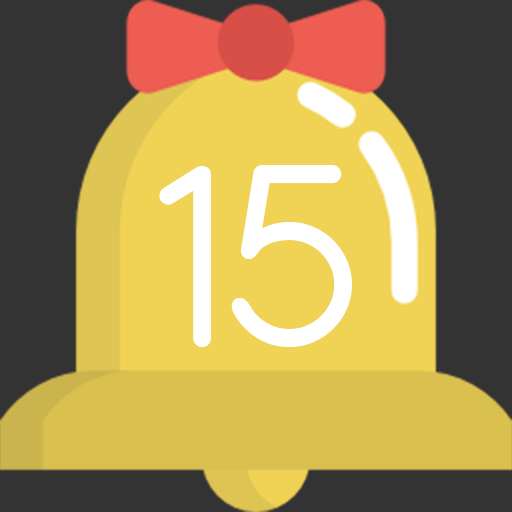
<style>
.page{position:relative;width:512px;height:512px;background:#333333}
.page>*{position:absolute;margin:0}
.t1{font:284.4px "Antipasto";color:#ffffff}
</style>
<div class="page">
<p class="t1" style="left:159px;top:165px;width:193px;height:182px">15</p>
</div>
